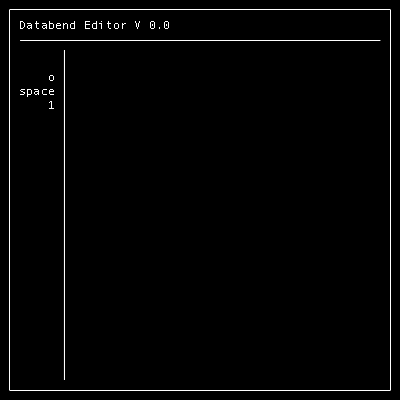
<style>
.page{position:relative;width:400px;height:400px;background:#000000}
.page>*{position:absolute;margin:0}
.t1{font:12px "AndaleMono";color:#ffffff}
</style>
<div class="page">
<p class="t1" style="left:20px;top:21px;width:149px;height:8px">Databend Editor V 0.0</p>
<p class="t1" style="left:20px;top:75px;width:34px;height:34px;text-align:right">o<br>space<br>1</p>
</div>
